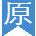
<style>
.page{position:relative;width:36px;height:36px;background:#438bd1}
.page>*{position:absolute;margin:0}
.t1{font:26.6px "STHeitiSC-Light";letter-spacing:0.06em;color:#ffffff;scale:1.17 1}
</style>
<div class="page">
<p class="t1" style="left:4px;top:2px;width:28px;height:23px">原</p>
</div>
